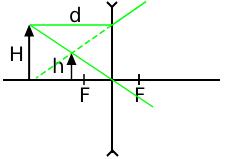
<style>
.page{position:relative;width:225px;height:159px;background:#ffffff}
.page>*{position:absolute;margin:0}
.t1{font:20px "DejaVuSans";color:#000000}
</style>
<div class="page">
<p class="t1" style="left:70px;top:6px;width:10px;height:17px">d</p>
<p class="t1" style="left:10px;top:46px;width:13px;height:15px">H</p>
<p class="t1" style="left:53px;top:57px;width:10px;height:16px">h</p>
<p class="t1" style="left:80px;top:87px;width:10px;height:15px">F</p>
<p class="t1" style="left:135px;top:87px;width:10px;height:15px">F</p>
</div>
